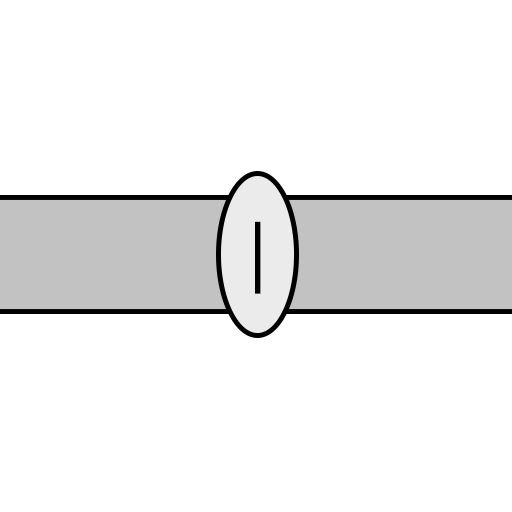
<style>
.page{position:relative;width:512px;height:512px;background:#ffffff}
.page>*{position:absolute;margin:0}
.t1{font:99.9px "PrisonerSF";color:#000000;scale:0.5 1}
</style>
<div class="page">
<p class="t1" style="left:255px;top:221px;width:6px;height:73px">1</p>
</div>
